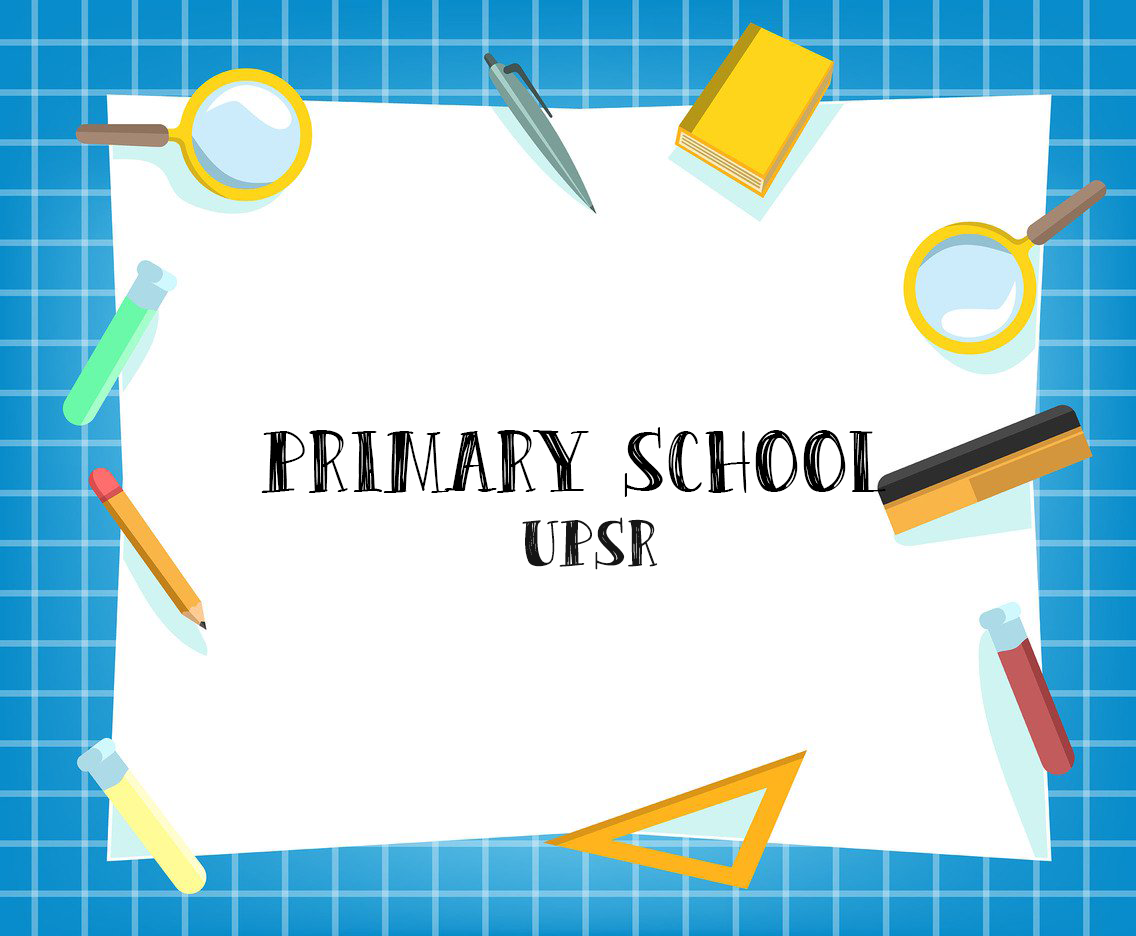
<style>
.page{position:relative;width:1136px;height:936px;background:#ffffff}
.page>*{position:absolute;margin:0}
.t1{font:100px "Peas&Carrots";letter-spacing:0.025em;color:#000000}
.t2{font:75px "Peas&Carrots";letter-spacing:0.025em;color:#151515}
</style>
<div class="page">
<p class="t1" style="left:261px;top:427px;width:625px;height:70px">PRIMARY SCHOOL</p>
<p class="t2" style="left:522px;top:517px;width:136px;height:53px">UPSR</p>
</div>
